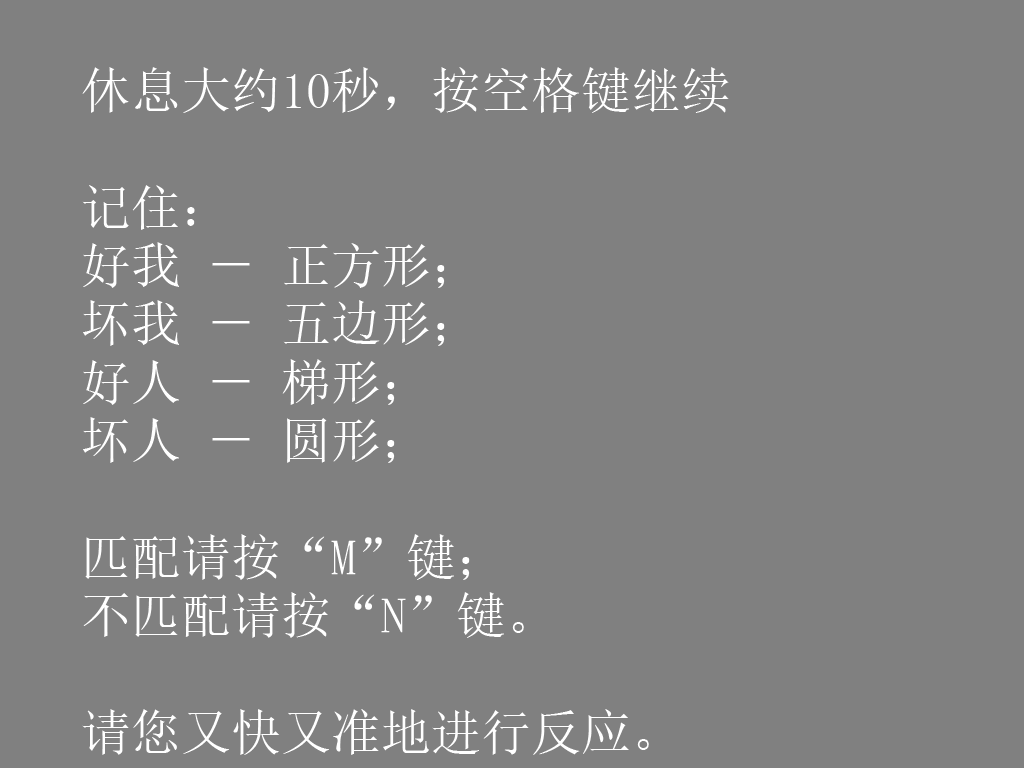
<style>
.page{position:relative;width:1024px;height:768px;background:#808080}
.page>*{position:absolute;margin:0}
.t1{font:50px/58.3px "SimSun";color:#ffffff}
</style>
<div class="page">
<p class="t1" style="left:82px;top:67px;width:647px;height:688px">休息大约10秒，按空格键继续<br><br>记住： <br>好我 － 正方形；<br>坏我 － 五边形；<br>好人 － 梯形；<br>坏人 － 圆形；<br><br>匹配请按“M”键；<br>不匹配请按“N”键。<br><br>请您又快又准地进行反应。</p>
</div>
